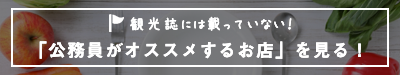
<style>
.page{position:relative;width:400px;height:75px}
.page>*{position:absolute;margin:0}
.t1{font:16px "APJapanesefont";letter-spacing:0.05em;color:#ffffff}
.t2{font:18px "MidashiGoPr6N-MB31";letter-spacing:0.05em;color:#ffffff}
</style>
<div class="page">
<p class="t1" style="left:130px;top:16px;width:162px;height:15px">観光誌には載っていない！</p>
<p class="t2" style="left:39px;top:41px;width:322px;height:18px">「公務員がオススメするお店」を見る！</p>
</div>
